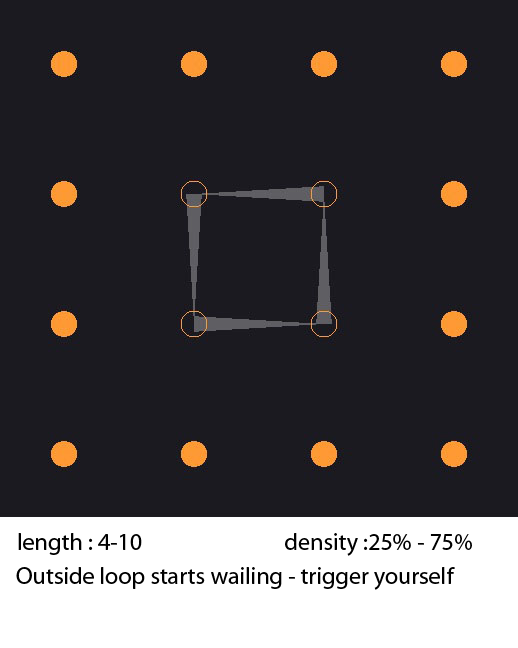
<style>
.page{position:relative;width:518px;height:648px;background:#1b1a20}
.page>*{position:absolute;margin:0}
.t1{font:24px "MyriadPro-Regular";color:#000000}
</style>
<div class="page">
<p class="t1" style="left:18px;top:533px;width:454px;height:23px">length : 4-10                            density :25% - 75%</p>
<p class="t1" style="left:16px;top:567px;width:439px;height:23px">Outside loop starts wailing - trigger yourself</p>
</div>
